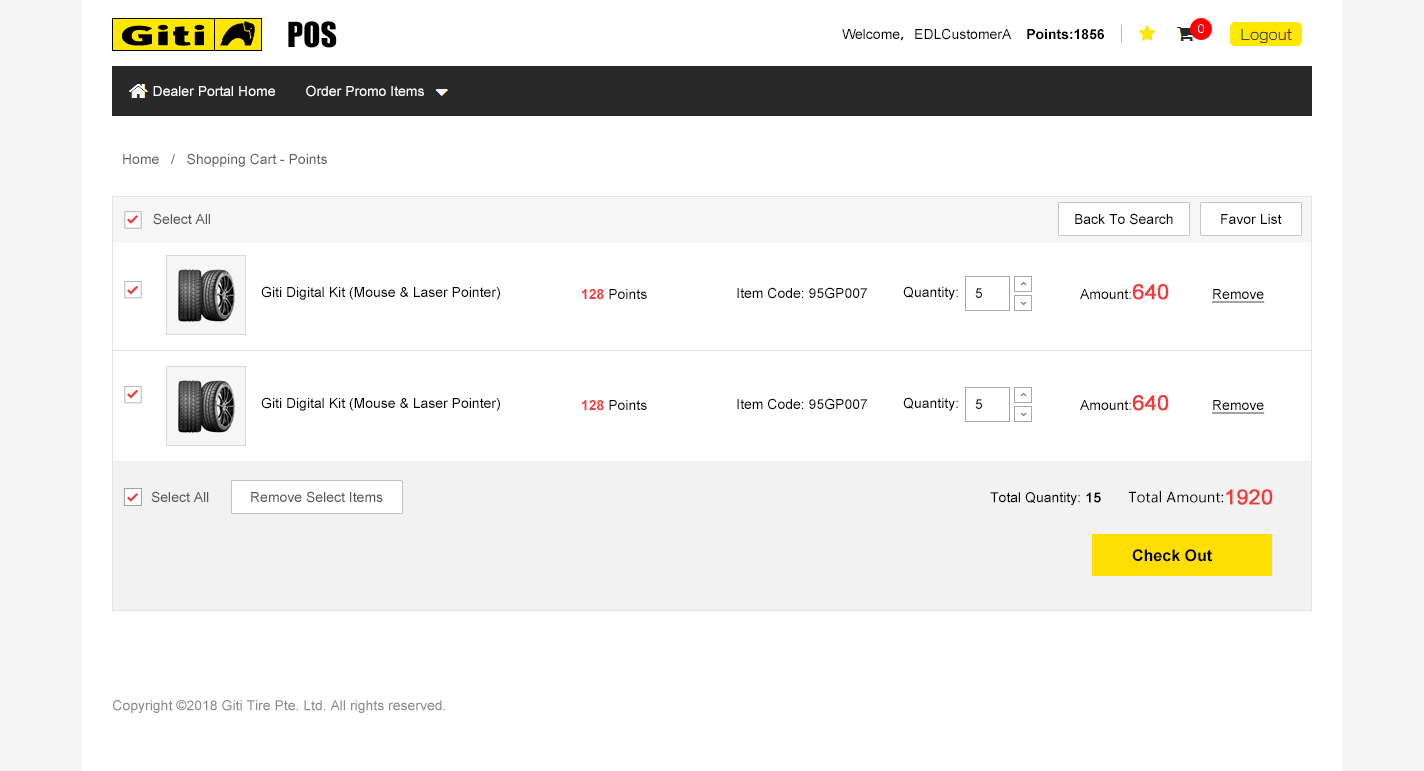
<style>
.page{position:relative;width:1424px;height:771px;background:#ffffff}
.page>*{position:absolute;margin:0}
.t1{font:32px "Impact";color:#000000}
.t2{font:14px "ArialMT";color:#000000}
.t3{font:14px "AdobeHeitiStd-Regular";color:#000000}
.t4{font:14px "Arial-BoldMT";color:#000000}
.t5{font:14px "ArialMT";color:#ffffff}
.t6{font:14px "ArialMT";color:#626262}
.t7{font:14px "ArialMT";color:#565656}
.t8{font:14px "Arial-BoldMT";color:#f23c3c}
.t9{font:21px "ArialMT";color:#f23c3c;font-weight:bold}
.t10{font:14px "ArialMT";color:#000000;text-decoration:underline}
.t11{font:14px "ArialMT";color:#000000;font-weight:bold}
.t12{font:14px "MicrosoftYaHei";color:#000000}
.t13{font:16px "Arial-BoldMT";color:#010101}
.t14{font:14px "ArialMT";color:#898989}
</style>
<div class="page">
<p class="t1" style="left:288px;top:21px;width:49px;height:27px">POS</p>
<p class="t2" style="left:842px;top:28px;width:262px;height:13px">Welcome<span class="t3">，</span>EDLCustomerA    <span class="t4">Points:1856</span></p>
<p class="t5" style="left:153px;top:86px;width:122px;height:10px">Dealer Portal Home</p>
<p class="t5" style="left:306px;top:85px;width:118px;height:12px">Order Promo Items</p>
<p class="t6" style="left:123px;top:153px;width:204px;height:14px">Home   /   Shopping Cart - Points</p>
<p class="t7" style="left:153px;top:213px;width:57px;height:12px">Select All</p>
<p class="t2" style="left:1075px;top:213px;width:98px;height:12px">Back To Search</p>
<p class="t2" style="left:1221px;top:214px;width:61px;height:10px">Favor List</p>
<p class="t2" style="left:261px;top:286px;width:239px;height:14px">Giti Digital Kit (Mouse &amp; Laser Pointer)</p>
<p class="t2" style="left:582px;top:289px;width:65px;height:11px"><span class="t8">128</span> Points</p>
<p class="t2" style="left:737px;top:287px;width:130px;height:12px">Item Code: 95GP007</p>
<p class="t2" style="left:903px;top:286px;width:55px;height:14px">Quantity:</p>
<p class="t2" style="left:975px;top:288px;width:7px;height:10px">5</p>
<p class="t2" style="left:1080px;top:284px;width:89px;height:16px">Amount:<span class="t9">640</span></p>
<p class="t10" style="left:1212px;top:289px;width:53px;height:14px">Remove</p>
<p class="t2" style="left:261px;top:397px;width:239px;height:14px">Giti Digital Kit (Mouse &amp; Laser Pointer)</p>
<p class="t2" style="left:582px;top:400px;width:65px;height:11px"><span class="t8">128</span> Points</p>
<p class="t2" style="left:737px;top:398px;width:130px;height:12px">Item Code: 95GP007</p>
<p class="t2" style="left:903px;top:397px;width:55px;height:14px">Quantity:</p>
<p class="t2" style="left:975px;top:399px;width:7px;height:10px">5</p>
<p class="t2" style="left:1080px;top:395px;width:89px;height:16px">Amount:<span class="t9">640</span></p>
<p class="t10" style="left:1212px;top:400px;width:53px;height:14px">Remove</p>
<p class="t7" style="left:151px;top:491px;width:58px;height:12px">Select All</p>
<p class="t7" style="left:251px;top:491px;width:132px;height:12px">Remove Select Items</p>
<p class="t2" style="left:990px;top:489px;width:283px;height:16px">Total Quantity: <span class="t11">15       </span><span class="t12">Total Amount:</span><span class="t9">1920</span></p>
<p class="t13" style="left:1132px;top:549px;width:80px;height:13px">Check Out</p>
<p class="t14" style="left:113px;top:700px;width:332px;height:13px">Copyright ©2018 Giti Tire Pte. Ltd. All rights reserved.</p>
</div>
